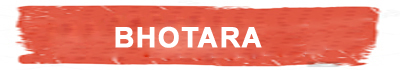
<style>
.page{position:relative;width:400px;height:70px}
.page>*{position:absolute;margin:0}
.t1{font:28px "Arial-BoldMT";color:#ffffff;text-transform:uppercase;font-weight:bold}
</style>
<div class="page">
<p class="t1" style="left:115px;top:26px;width:147px;height:22px">Bhotara</p>
</div>
